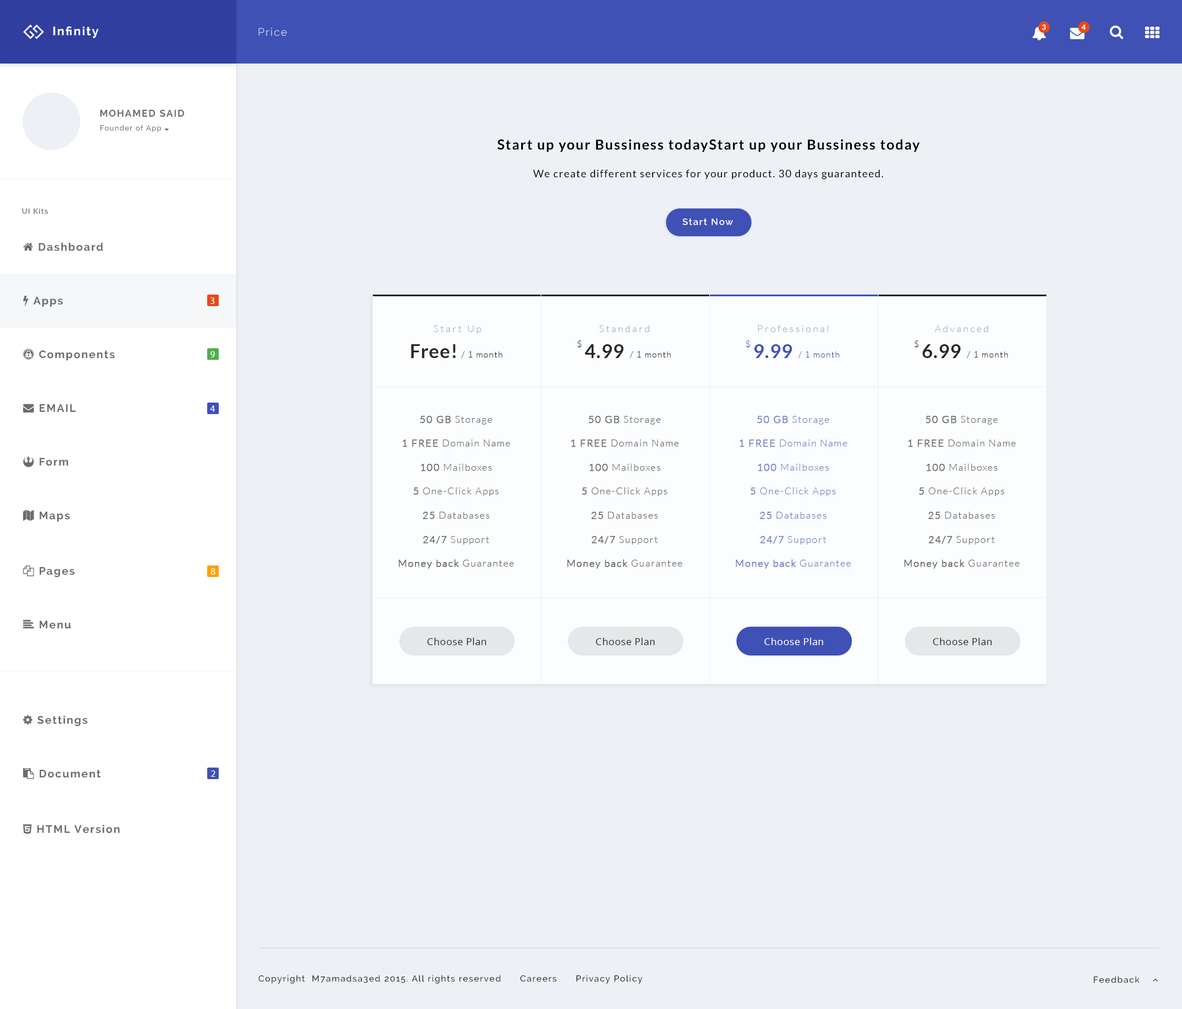
<style>
.page{position:relative;width:1182px;height:1009px;background:#edf0f5}
.page>*{position:absolute;margin:0}
.t1{font:12px "Raleway-Bold";letter-spacing:0.1em;color:#ffffff}
.t2{font:10.8px "Raleway";letter-spacing:0.1em;color:#c5cae9}
.t3{font:7.2px "Lato-Bold";letter-spacing:0.1em;color:#ffffff}
.t4{font:9.6px "Raleway-Bold";letter-spacing:0.1em;color:#6a6c6f}
.t5{font:10.4px/27.7px "Lato-Regular";letter-spacing:0.075em;color:#000000}
.t6{font:13.9px/27.7px "Lato-Bold";letter-spacing:0.075em;color:#000000}
.t7{font:7.2px "Raleway-SemiBold";letter-spacing:0.1em;color:#6a6c6f}
.t8{font:9.2px "Raleway-SemiBold";letter-spacing:0.1em;color:#ffffff}
.t9{font:9.6px "MyriadPro-Regular";letter-spacing:0.1em;color:#ffffff}
.t10{font:9.6px "Lato-Light";letter-spacing:0.2em;color:#a5b1bd}
.t11{font:9.2px "Lato-Light";color:#282828}
.t12{font:9.2px "Lato-Light";color:#3f51b5}
.t13{font:19.2px "Lato-Bold";letter-spacing:0.025em;color:#282828}
.t14{font:8.4px "Lato-Light";letter-spacing:0.1em;color:#282828}
.t15{font:19.2px "Lato-Bold";letter-spacing:0.025em;color:#3f51b5}
.t16{font:8.4px "Lato-Light";letter-spacing:0.1em;color:#3f51b5}
.t17{font:9.6px/24.1px "Lato-Light";letter-spacing:0.1em;color:#676768}
.t18{font:9.6px/24.1px "Lato-Light";letter-spacing:0.1em;color:#676768;font-weight:bold}
.t19{font:9.6px/24.1px "Lato-Light";letter-spacing:0.1em;color:#737ec5}
.t20{font:9.6px/24.1px "Lato-Light";letter-spacing:0.1em;color:#737ec5;font-weight:bold}
.t21{font:9.6px "OpenSans";letter-spacing:0.05em;color:#282828}
.t22{font:9.6px "OpenSans";letter-spacing:0.05em;color:#ffffff}
.t23{font:8.7px "Raleway-Medium";letter-spacing:0.1em;color:#282828}
</style>
<div class="page">
<p class="t1" style="left:53px;top:26px;width:46px;height:12px">Infinity</p>
<p class="t2" style="left:259px;top:28px;width:28px;height:8px">Price</p>
<p class="t3" style="left:1042px;top:24px;width:4px;height:6px">3</p>
<p class="t3" style="left:1082px;top:24px;width:4px;height:6px">4</p>
<p class="t4" style="left:100px;top:110px;width:84px;height:7px">MOHAMED SAID</p>
<p class="t5" style="left:498px;top:139px;width:422px;height:41px;text-align:center"><span class="t6">Start up your Bussiness todayStart up your Bussiness today<br></span>We create different services for your product. 30 days guaranteed.</p>
<p class="t7" style="left:22px;top:208px;width:26px;height:6px">UI Kits</p>
<p class="t8" style="left:682px;top:218px;width:51px;height:7px">Start Now</p>
<p class="t9" style="left:210px;top:297px;width:5px;height:7px">3</p>
<p class="t10" style="left:434px;top:325px;width:47px;height:9px">Start Up</p>
<p class="t10" style="left:599px;top:325px;width:50px;height:7px">Standard</p>
<p class="t10" style="left:758px;top:324px;width:70px;height:8px">Professional</p>
<p class="t10" style="left:935px;top:325px;width:53px;height:7px">Advanced</p>
<p class="t11" style="left:577px;top:339px;width:5px;height:9px">$</p>
<p class="t12" style="left:746px;top:339px;width:4px;height:9px">$</p>
<p class="t11" style="left:914px;top:339px;width:5px;height:9px">$</p>
<p class="t9" style="left:210px;top:351px;width:5px;height:7px">9</p>
<p class="t13" style="left:411px;top:344px;width:45px;height:14px">Free!</p>
<p class="t14" style="left:461px;top:351px;width:42px;height:7px">/ 1 month</p>
<p class="t13" style="left:585px;top:344px;width:39px;height:14px">4.99</p>
<p class="t14" style="left:630px;top:351px;width:41px;height:7px">/ 1 month</p>
<p class="t15" style="left:755px;top:344px;width:38px;height:14px">9.99</p>
<p class="t16" style="left:798px;top:351px;width:42px;height:7px">/ 1 month</p>
<p class="t13" style="left:923px;top:344px;width:38px;height:14px">6.99</p>
<p class="t14" style="left:967px;top:351px;width:42px;height:7px">/ 1 month</p>
<p class="t9" style="left:210px;top:405px;width:5px;height:7px">4</p>
<p class="t17" style="left:399px;top:416px;width:115px;height:153px;text-align:center"><span class="t18">50 GB</span> Storage<br><span class="t18">1 FREE</span> Domain Name<br><span class="t18">100</span> Mailboxes<br><span class="t18">5</span> One-Click Apps<br><span class="t18">25</span> Databases<br><span class="t18">24/7</span> Support<br><span class="t18">Money back</span> Guarantee</p>
<p class="t17" style="left:567px;top:416px;width:115px;height:153px;text-align:center"><span class="t18">50 GB</span> Storage<br><span class="t18">1 FREE</span> Domain Name<br><span class="t18">100</span> Mailboxes<br><span class="t18">5</span> One-Click Apps<br><span class="t18">25</span> Databases<br><span class="t18">24/7</span> Support<br><span class="t18">Money back</span> Guarantee</p>
<p class="t19" style="left:736px;top:416px;width:115px;height:153px;text-align:center"><span class="t20">50 GB</span> Storage<br><span class="t20">1 FREE</span> Domain Name<br><span class="t20">100</span> Mailboxes<br><span class="t20">5</span> One-Click Apps<br><span class="t20">25</span> Databases<br><span class="t20">24/7</span> Support<br><span class="t20">Money back</span> Guarantee</p>
<p class="t17" style="left:905px;top:416px;width:115px;height:153px;text-align:center"><span class="t18">50 GB</span> Storage<br><span class="t18">1 FREE</span> Domain Name<br><span class="t18">100</span> Mailboxes<br><span class="t18">5</span> One-Click Apps<br><span class="t18">25</span> Databases<br><span class="t18">24/7</span> Support<br><span class="t18">Money back</span> Guarantee</p>
<p class="t9" style="left:211px;top:568px;width:4px;height:7px">8</p>
<p class="t21" style="left:427px;top:637px;width:60px;height:8px">Choose Plan</p>
<p class="t21" style="left:596px;top:637px;width:59px;height:8px">Choose Plan</p>
<p class="t22" style="left:764px;top:637px;width:60px;height:8px">Choose Plan</p>
<p class="t21" style="left:933px;top:637px;width:59px;height:8px">Choose Plan</p>
<p class="t9" style="left:211px;top:770px;width:4px;height:6px">2</p>
<p class="t23" style="left:259px;top:974px;width:384px;height:9px">Copyright  M7amadsa3ed 2015. All rights reserved      Careers      Privacy Policy</p>
</div>
